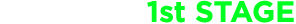
<style>
.page{position:relative;width:296px;height:24px;background:#ffffff}
.page>*{position:absolute;margin:0}
.t1{font:29.6px "Gotham-Bold";color:#00ff21}
</style>
<div class="page">
<p class="t1" style="left:147px;top:0px;width:147px;height:23px">1st STAGE</p>
</div>
